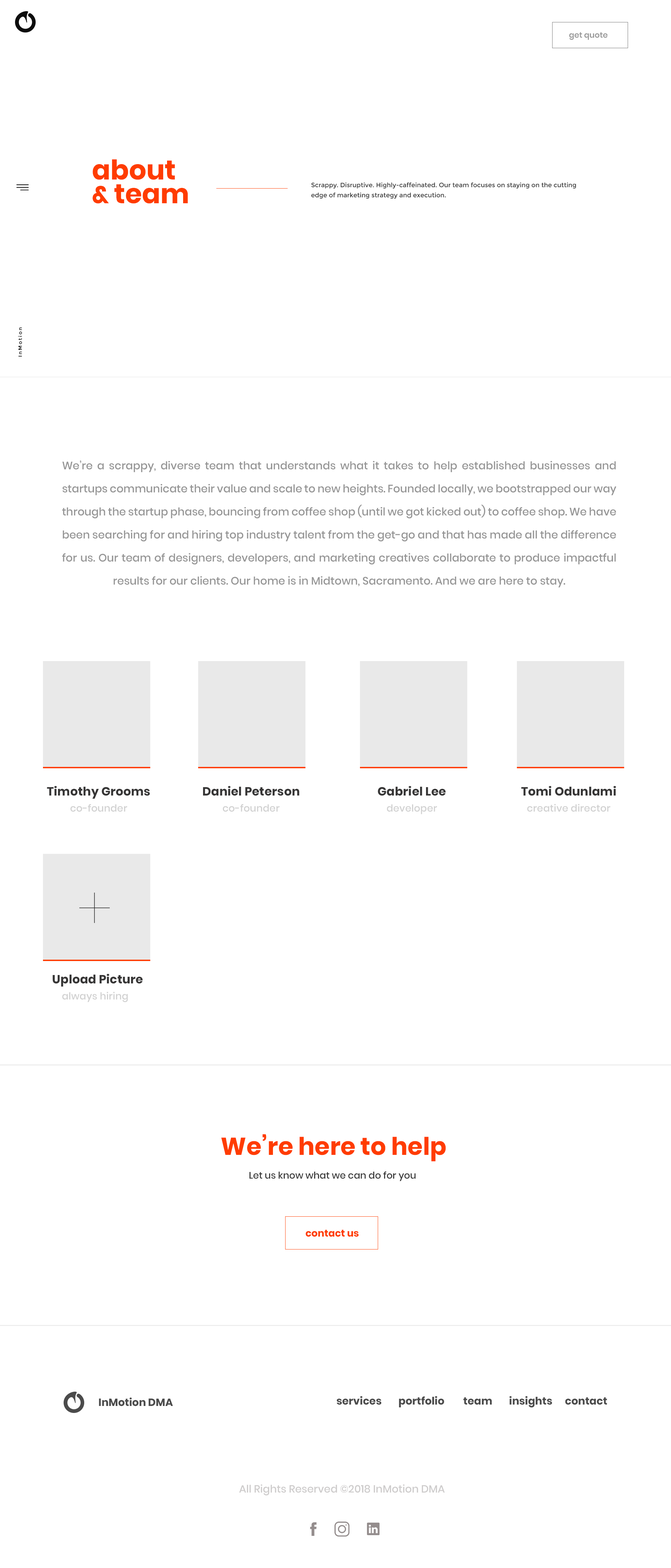
<style>
.page{position:relative;width:671px;height:1568px;background:#ffffff}
.page>*{position:absolute;margin:0}
.t1{font:7.9px "Poppins-SemiBold";color:#9b9b9b}
.t2{font:27.2px "Poppins-Bold";color:#ff3c00}
.t3{font:24.4px "Poppins-Bold";color:#ff3c00}
.t4{font:6.3px/10.1px "Montserrat-Regular";color:#3c3c3c}
.t5{font:4.8px "Montserrat-Regular";letter-spacing:0.22em;color:#0d0d0d}
.t6{font:10.8px/23px "Poppins-Medium";color:#969696}
.t7{font:11.9px "Poppins-Bold";letter-spacing:0.01em;color:#373636}
.t8{font:9.8px "Poppins-Medium";letter-spacing:0.01em;color:#d1d1d1}
.t9{font:9.4px "Poppins-Medium";color:#3d3d3d}
.t10{font:9.8px "Poppins-Bold";color:#ff3c00}
.t11{font:10.5px "Poppins-Bold";color:#4b4b4b}
.t12{font:10.5px "Poppins-Medium";color:#cecccc}
</style>
<div class="page">
<p class="t1" style="left:569px;top:32px;width:38px;height:8px">get quote</p>
<p class="t2" style="left:93px;top:159px;width:95px;height:45px">about     <span class="t3">&amp; </span>team</p>
<p class="t4" style="left:311px;top:182px;width:265px;height:17px">Scrappy. Disruptive. Highly-caffeinated. Our team focuses on staying on the cutting edge of marketing strategy and execution.</p>
<p class="t5" style="left:18px;top:327px;width:4px;height:30px;rotate:-90deg">InMotion</p>
<p class="t6" style="left:62px;top:461px;width:554px;height:126px;text-align:justify">We’re a scrappy, diverse team that understands what it takes to help established businesses and startups communicate their value and scale to new heights. Founded locally, we bootstrapped our way through the startup phase, bouncing from coffee shop (until we got kicked out) to coffee shop. We have been searching for and hiring top industry talent from the get-go and that has made all the difference for us. Our team of designers, developers, and marketing creatives collaborate to produce impactful results for our clients. Our home is in Midtown, Sacramento. And we are here to stay.</p>
<p class="t7" style="left:47px;top:786px;width:103px;height:13px">Timothy Grooms</p>
<p class="t7" style="left:203px;top:786px;width:96px;height:10px">Daniel Peterson</p>
<p class="t7" style="left:378px;top:786px;width:67px;height:10px">Gabriel Lee</p>
<p class="t7" style="left:521px;top:786px;width:95px;height:10px">Tomi Odunlami</p>
<p class="t8" style="left:70px;top:804px;width:57px;height:8px">co-founder</p>
<p class="t8" style="left:222px;top:804px;width:57px;height:8px">co-founder</p>
<p class="t8" style="left:387px;top:804px;width:50px;height:10px">developer</p>
<p class="t8" style="left:527px;top:804px;width:83px;height:8px">creative director</p>
<p class="t7" style="left:52px;top:974px;width:90px;height:13px">Upload Picture</p>
<p class="t8" style="left:62px;top:992px;width:66px;height:10px">always hiring</p>
<p class="t3" style="left:221px;top:1134px;width:225px;height:28px">We’re here to help</p>
<p class="t9" style="left:249px;top:1171px;width:166px;height:10px">Let us know what we can do for you</p>
<p class="t10" style="left:305px;top:1230px;width:53px;height:7px">contact us</p>
<p class="t11" style="left:99px;top:1397px;width:74px;height:9px">InMotion DMA</p>
<p class="t11" style="left:336px;top:1396px;width:271px;height:12px">services        portfolio         team        insights      contact</p>
<p class="t12" style="left:239px;top:1484px;width:206px;height:11px">All Rights Reserved ©2018 InMotion DMA</p>
</div>
